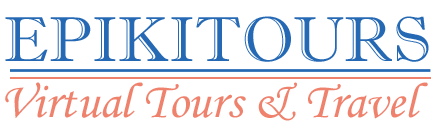
<style>
.page{position:relative;width:438px;height:138px;background:#ffffff}
.page>*{position:absolute;margin:0}
.t1{font:63.4px "ImprintMT-Shadow";color:#2569b4;text-transform:uppercase}
.t2{font:50.2px "MonotypeCorsiva";color:#ef826d}
</style>
<div class="page">
<p class="t1" style="left:5px;top:16px;width:424px;height:46px">epikitours</p>
<p class="t2" style="left:5px;top:82px;width:423px;height:39px">Virtual Tours &amp; Travel</p>
</div>
